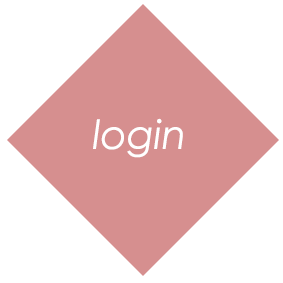
<style>
.page{position:relative;width:283px;height:283px;background:#ffffff}
.page>*{position:absolute;margin:0}
.t1{font:40px "CenturyGothic-Italic";color:#ffffff}
</style>
<div class="page">
<p class="t1" style="left:93px;top:118px;width:90px;height:40px">login</p>
</div>
